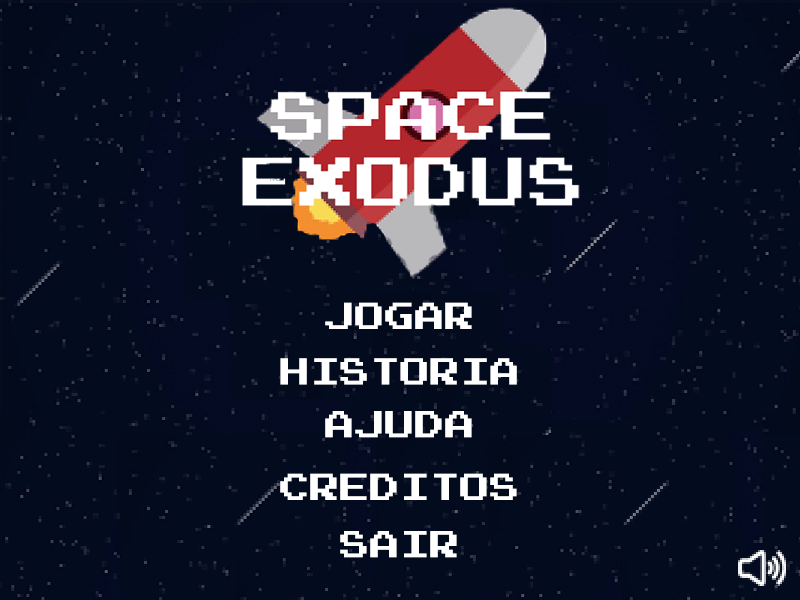
<style>
.page{position:relative;width:800px;height:600px;background:#030b1e}
.page>*{position:absolute;margin:0}
.t1{font:30px "PressStart2P";color:#ffffff}
</style>
<div class="page">
<p class="t1" style="left:325px;top:302px;width:147px;height:27px">JOGAR</p>
<p class="t1" style="left:280px;top:358px;width:237px;height:27px">HISTORIA</p>
<p class="t1" style="left:325px;top:411px;width:147px;height:27px">AJUDA</p>
<p class="t1" style="left:280px;top:473px;width:237px;height:27px">CREDITOS</p>
<p class="t1" style="left:340px;top:531px;width:117px;height:27px">SAIR</p>
</div>
